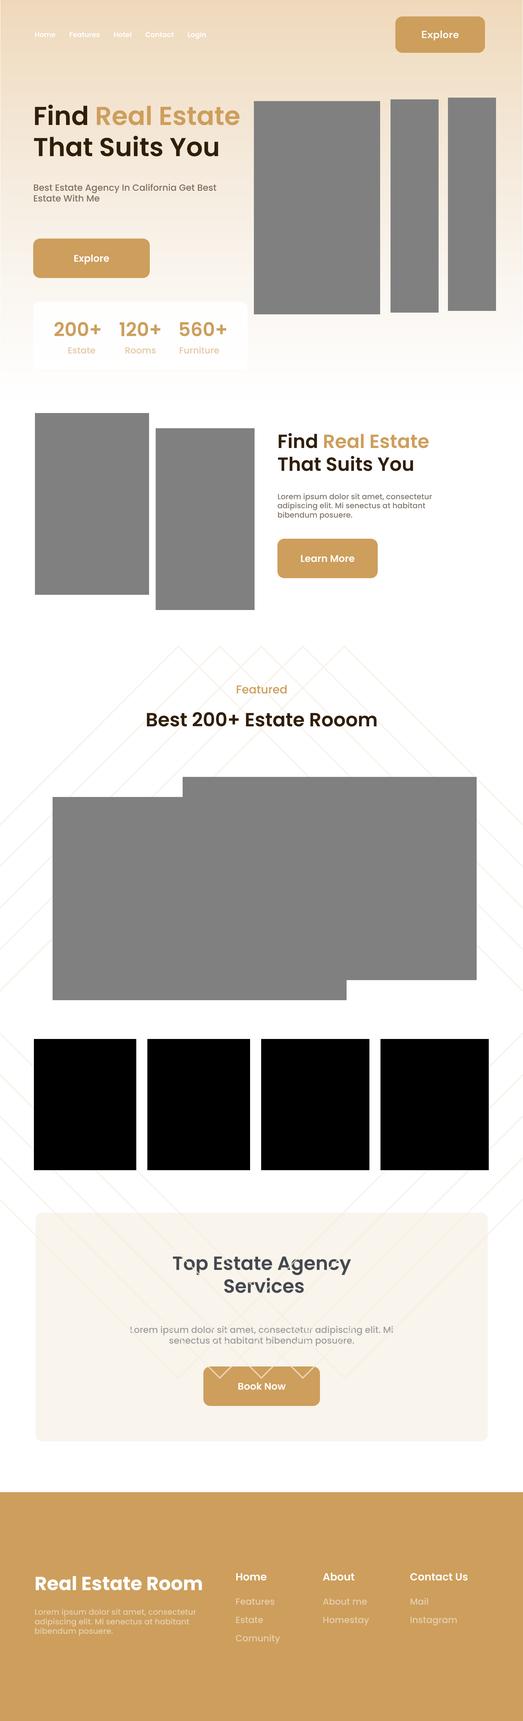
<style>
.page{position:relative;width:523px;height:1721px;background:#ffffff}
.page>*{position:absolute;margin:0}
.t1{font:6.9px "Poppins-SemiBold";color:#ffffff}
.t2{font:10.4px "DMSans-Bold";color:#ffffff}
.t3{font:26px "Poppins-SemiBold";color:#301e09}
.t4{font:26px "Poppins-SemiBold";color:#cd9e5c}
.t5{font:9px "Poppins-Medium";color:#7f705f}
.t6{font:9.7px "Poppins-SemiBold";color:#ffffff}
.t7{font:19px "Poppins-SemiBold";color:#cd9e5c}
.t8{font:9px "Poppins-Medium";color:#e3c8a3}
.t9{font:19px "Poppins-SemiBold";color:#301e09}
.t10{font:7.6px "Poppins-Medium";color:#83786b}
.t11{font:11.4px "Poppins-Medium";color:#cd9e5c}
.t12{font:19px "Poppins-SemiBold";color:#45484e}
.t13{font:9px "Poppins-Medium";color:#9f9e9d}
.t14{font:19px "Poppins-Bold";color:#ffffff}
.t15{font:10.4px "Poppins-SemiBold";color:#ffffff}
.t16{font:9px "Poppins-Medium";color:#e6cfae}
.t17{font:8px "Poppins-Medium";color:#e6cfae}
</style>
<div class="page">
<p class="t1" style="left:35px;top:32px;width:20px;height:5px">Home</p>
<p class="t1" style="left:70px;top:32px;width:30px;height:5px">Features</p>
<p class="t1" style="left:114px;top:32px;width:18px;height:5px">Hotel</p>
<p class="t1" style="left:145px;top:32px;width:29px;height:5px">Contact</p>
<p class="t1" style="left:188px;top:32px;width:18px;height:7px">Login</p>
<p class="t2" style="left:422px;top:30px;width:37px;height:10px">Explore</p>
<p class="t3" style="left:34px;top:105px;width:206px;height:51px">Find<span class="t4"> Real Estate</span><br>That Suits You</p>
<p class="t5" style="left:34px;top:183px;width:183px;height:19px">Best Estate Agency In California Get Best <br>Estate With Me</p>
<p class="t6" style="left:74px;top:254px;width:35px;height:10px">Explore</p>
<p class="t7" style="left:54px;top:322px;width:47px;height:14px">200+</p>
<p class="t7" style="left:119px;top:322px;width:42px;height:14px">120+</p>
<p class="t7" style="left:180px;top:322px;width:47px;height:14px">560+</p>
<p class="t8" style="left:68px;top:347px;width:28px;height:7px">Estate</p>
<p class="t8" style="left:125px;top:347px;width:31px;height:7px">Rooms</p>
<p class="t8" style="left:180px;top:346px;width:39px;height:8px">Furniture</p>
<p class="t9" style="left:278px;top:433px;width:151px;height:38px">Find<span class="t7"> Real Estate<br></span>That Suits You</p>
<p class="t10" style="left:278px;top:493px;width:154px;height:27px">Lorem ipsum dolor sit amet, consectetur adipiscing elit. Mi senectus at habitant bibendum posuere.</p>
<p class="t6" style="left:301px;top:555px;width:54px;height:7px">Learn More</p>
<p class="t11" style="left:237px;top:685px;width:50px;height:9px">Featured</p>
<p class="t9" style="left:147px;top:712px;width:230px;height:15px">Best 200+ Estate Rooom</p>
<p class="t12" style="left:173px;top:1256px;width:178px;height:37px;text-align:center">Top Estate Agency<br> Services</p>
<p class="t13" style="left:130px;top:1325px;width:263px;height:21px;text-align:center">Lorem ipsum dolor sit amet, consectetur adipiscing elit. Mi senectus at habitant bibendum posuere.</p>
<p class="t6" style="left:238px;top:1382px;width:48px;height:8px">Book Now</p>
<p class="t14" style="left:36px;top:1576px;width:166px;height:14px">Real Estate Room</p>
<p class="t15" style="left:236px;top:1573px;width:31px;height:8px">Home</p>
<p class="t15" style="left:323px;top:1572px;width:32px;height:9px">About</p>
<p class="t15" style="left:411px;top:1573px;width:57px;height:8px">Contact Us</p>
<p class="t16" style="left:236px;top:1598px;width:39px;height:7px">Features</p>
<p class="t16" style="left:323px;top:1598px;width:44px;height:7px">About me</p>
<p class="t16" style="left:411px;top:1597px;width:18px;height:8px">Mail</p>
<p class="t17" style="left:35px;top:1608px;width:161px;height:28px">Lorem ipsum dolor sit amet, consectetur adipiscing elit. Mi senectus at habitant bibendum posuere.</p>
<p class="t16" style="left:236px;top:1616px;width:27px;height:7px">Estate</p>
<p class="t16" style="left:323px;top:1616px;width:46px;height:9px">Homestay</p>
<p class="t16" style="left:411px;top:1616px;width:46px;height:10px">Instagram</p>
<p class="t16" style="left:236px;top:1634px;width:44px;height:10px">Comunity</p>
</div>
